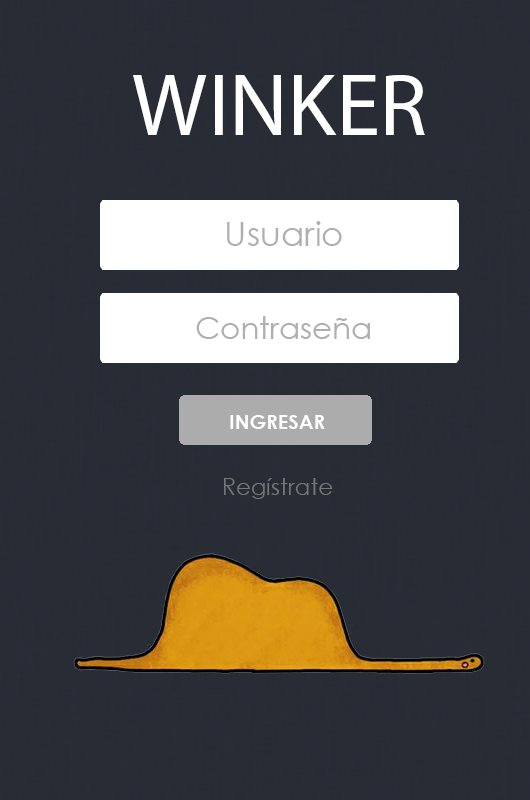
<style>
.page{position:relative;width:530px;height:800px;background:#272c35}
.page>*{position:absolute;margin:0}
.t1{font:88.9px "MyriadPro-Regular";color:#ffffff}
.t2{font:34.3px "CenturyGothic";color:#afafaf}
.t3{font:30.6px "CenturyGothic";color:#afafaf}
.t4{font:20px "CenturyGothic-Bold";color:#ffffff}
.t5{font:23px "CenturyGothic";color:#787676}
</style>
<div class="page">
<p class="t1" style="left:133px;top:75px;width:292px;height:60px">WINKER</p>
<p class="t2" style="left:227px;top:221px;width:115px;height:25px">Usuario</p>
<p class="t3" style="left:196px;top:316px;width:174px;height:23px">Contraseña</p>
<p class="t4" style="left:230px;top:415px;width:95px;height:14px">INGRESAR</p>
<p class="t5" style="left:224px;top:478px;width:109px;height:21px">Regístrate</p>
</div>
